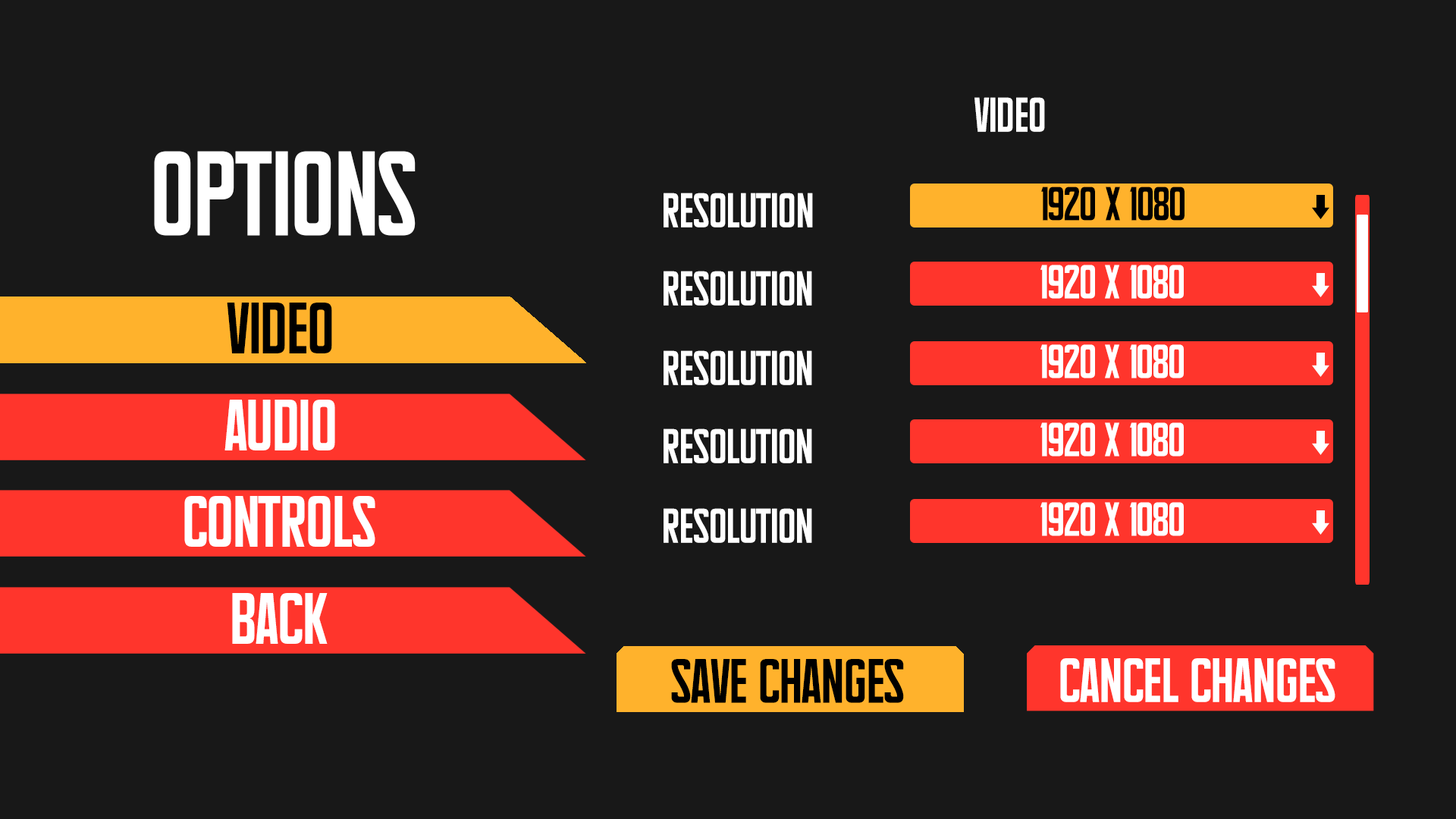
<style>
.page{position:relative;width:1456px;height:819px;background:#181818}
.page>*{position:absolute;margin:0}
.t1{font:33.2px "Supertalls";color:#ffffff}
.t2{font:82.1px "Supertalls";color:#ffffff}
.t3{font:32.6px "Supertalls";color:#000000}
.t4{font:32.6px "Supertalls";color:#ffffff}
.t5{font:49.5px "Supertalls";color:#000000}
.t6{font:49.5px "Supertalls";color:#ffffff}
.t7{font:42.7px "Supertalls";color:#000000}
.t8{font:42.7px "Supertalls";color:#ffffff}
</style>
<div class="page">
<p class="t1" style="left:974px;top:97px;width:71px;height:35px">video</p>
<p class="t2" style="left:154px;top:151px;width:262px;height:85px">options</p>
<p class="t1" style="left:664px;top:193px;width:149px;height:34px">resolution</p>
<p class="t3" style="left:1041px;top:187px;width:144px;height:34px">1920 x 1080</p>
<p class="t4" style="left:1040px;top:265px;width:144px;height:34px">1920 x 1080</p>
<p class="t1" style="left:664px;top:271px;width:148px;height:35px">resolution</p>
<p class="t5" style="left:227px;top:303px;width:105px;height:50px">VIDEO</p>
<p class="t1" style="left:664px;top:350px;width:148px;height:35px">resolution</p>
<p class="t4" style="left:1040px;top:344px;width:144px;height:34px">1920 x 1080</p>
<p class="t6" style="left:224px;top:400px;width:111px;height:50px">audio</p>
<p class="t4" style="left:1040px;top:422px;width:144px;height:35px">1920 x 1080</p>
<p class="t1" style="left:664px;top:428px;width:148px;height:35px">resolution</p>
<p class="t6" style="left:184px;top:496px;width:191px;height:51px">controls</p>
<p class="t1" style="left:664px;top:508px;width:148px;height:35px">resolution</p>
<p class="t4" style="left:1040px;top:502px;width:144px;height:34px">1920 x 1080</p>
<p class="t6" style="left:232px;top:593px;width:96px;height:51px">back</p>
<p class="t7" style="left:671px;top:659px;width:233px;height:44px">save changes</p>
<p class="t8" style="left:1060px;top:658px;width:275px;height:44px">CANCEL changes</p>
</div>
